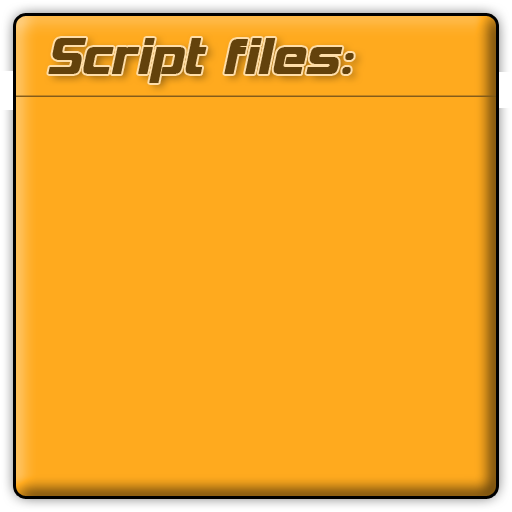
<style>
.page{position:relative;width:512px;height:512px;background:#ffaa1e}
.page>*{position:absolute;margin:0}
.t1{font:60px "HemiHead426";color:#63420c;font-weight:bold}
</style>
<div class="page">
<p class="t1" style="left:48px;top:38px;width:306px;height:45px">Script files:</p>
</div>
